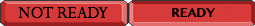
<style>
.page{position:relative;width:255px;height:26px;background:#d83939}
.page>*{position:absolute;margin:0}
.t1{font:18px "Perpetua";color:#000000}
.t2{font:12px "MyanmarMN-Bold";color:#000000}
</style>
<div class="page">
<p class="t1" style="left:18px;top:6px;width:90px;height:13px">NOT READY</p>
<p class="t2" style="left:172px;top:7px;width:43px;height:10px">READY</p>
</div>
